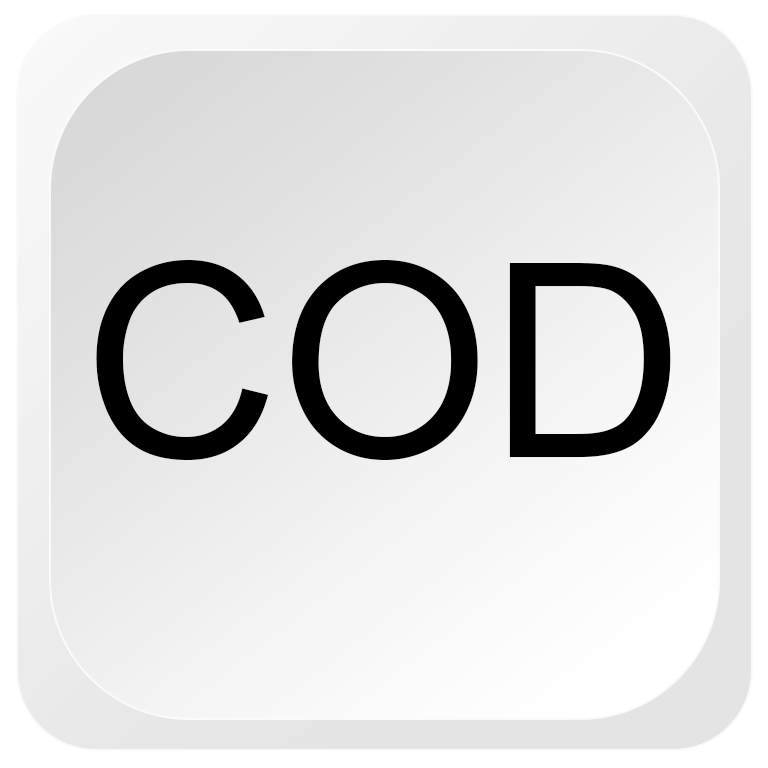
<style>
.page{position:relative;width:768px;height:768px}
.page>*{position:absolute;margin:0}
.t1{font:271px "ArialMT";color:#000000}
</style>
<div class="page">
<p class="t1" style="left:96px;top:260px;width:575px;height:200px">COD</p>
</div>
